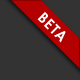
<style>
.page{position:relative;width:80px;height:80px;background:#333333}
.page>*{position:absolute;margin:0}
.t1{font:14px "FuturaStd-Heavy";letter-spacing:0.1em;color:#ffffff}
</style>
<div class="page">
<p class="t1" style="left:37px;top:11px;width:29px;height:32px;rotate:45deg">BETA</p>
</div>
